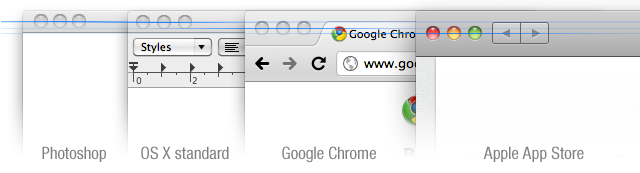
<style>
.page{position:relative;width:640px;height:173px;background:#ffffff}
.page>*{position:absolute;margin:0}
.t1{font:17px "HelveticaNeueLTStd-Cn";color:#7f7f7f}
</style>
<div class="page">
<p class="t1" style="left:42px;top:146px;width:64px;height:16px">Photoshop</p>
<p class="t1" style="left:141px;top:146px;width:88px;height:14px">OS X standard</p>
<p class="t1" style="left:282px;top:146px;width:94px;height:17px">Google Chrome</p>
<p class="t1" style="left:483px;top:146px;width:101px;height:16px">Apple App Store</p>
</div>
